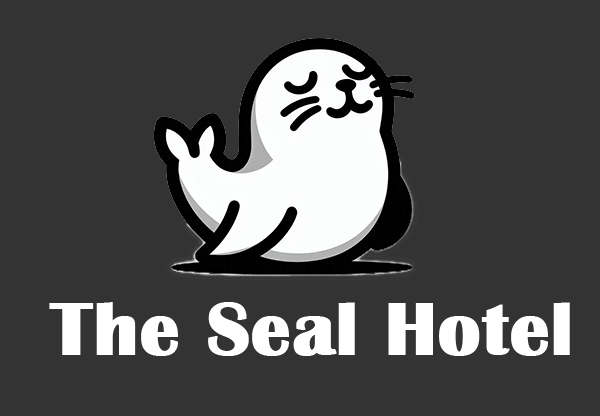
<style>
.page{position:relative;width:600px;height:416px;background:#333333}
.page>*{position:absolute;margin:0}
.t1{font:76.2px "BritannicBold";color:#ffffff;font-weight:bold}
</style>
<div class="page">
<p class="t1" style="left:49px;top:302px;width:521px;height:54px">The Seal Hotel</p>
</div>
